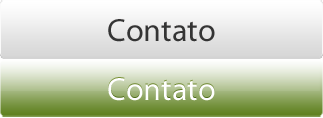
<style>
.page{position:relative;width:323px;height:118px}
.page>*{position:absolute;margin:0}
.t1{font:32.3px "MyriadPro-Regular";color:#343434}
.t2{font:32.3px "MyriadPro-Regular";color:#ffffff}
</style>
<div class="page">
<p class="t1" style="left:108px;top:19px;width:107px;height:23px">Contato</p>
<p class="t2" style="left:108px;top:78px;width:107px;height:23px">Contato</p>
</div>
